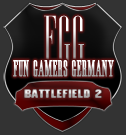
<style>
.page{position:relative;width:126px;height:135px;background:#333333}
.page>*{position:absolute;margin:0}
.t1{font:60.8px "Edition-Regular"}
.t2{font:20px "Edition-Regular";font-weight:bold}
.t3{font:14.6px "ATROX-normal";font-weight:bold}
</style>
<div class="page">
<p class="t1" style="left:44px;top:15px;width:40px;height:48px">FGG</p>
<p class="t2" style="left:13px;top:60px;width:101px;height:17px">fun gamers germany</p>
<p class="t3" style="left:24px;top:89px;width:78px;height:9px">battlefield 2</p>
</div>
